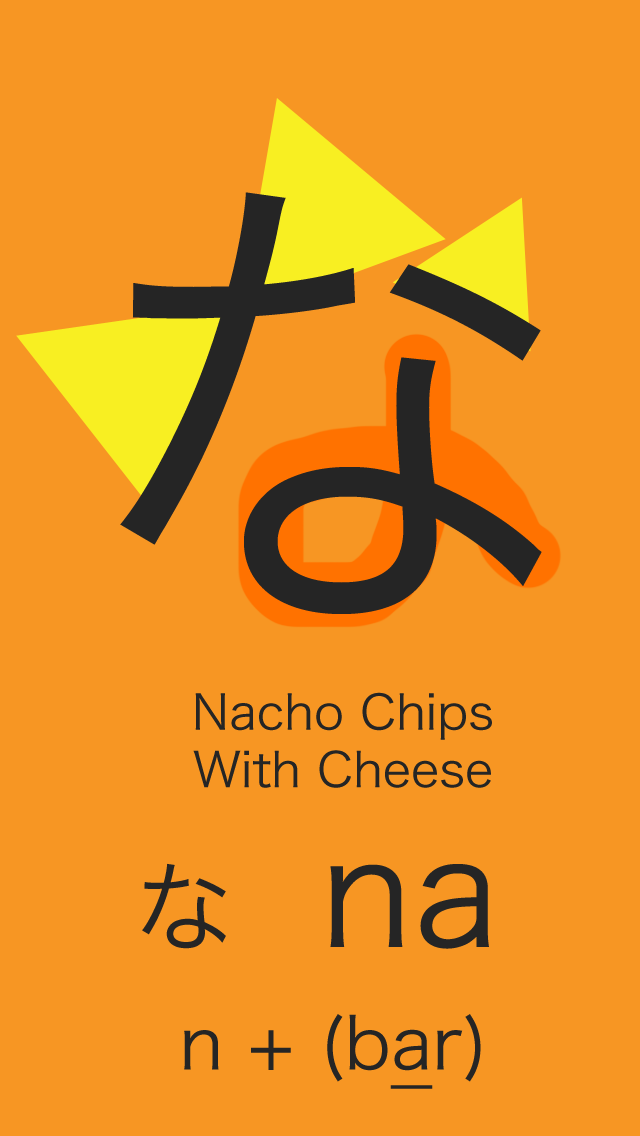
<style>
.page{position:relative;width:640px;height:1136px;background:#f79623}
.page>*{position:absolute;margin:0}
.t1{font:500px "HiraKakuPro-W3";color:#252525}
.t2{font:48px "HiraKakuPro-W3";color:#252525}
.t3{font:100px "HiraKakuPro-W3";color:#252525}
.t4{font:150px "HiraKakuPro-W3";color:#252525}
.t5{font:72px "HiraKakuPro-W3";color:#252525}
.t6{font:72px "HiraKakuPro-W3";color:#252525;text-decoration:underline}
</style>
<div class="page">
<p class="t1" style="left:120px;top:192px;width:422px;height:422px">な</p>
<p class="t2" style="left:193px;top:692px;width:299px;height:96px;text-align:center">Nacho Chips<br>With Cheese</p>
<p class="t3" style="left:142px;top:863px;width:84px;height:86px">な</p>
<p class="t4" style="left:330px;top:864px;width:159px;height:85px">na</p>
<p class="t5" style="left:184px;top:1014px;width:297px;height:75px">n + (b<span class="t6">a</span>r)</p>
</div>
